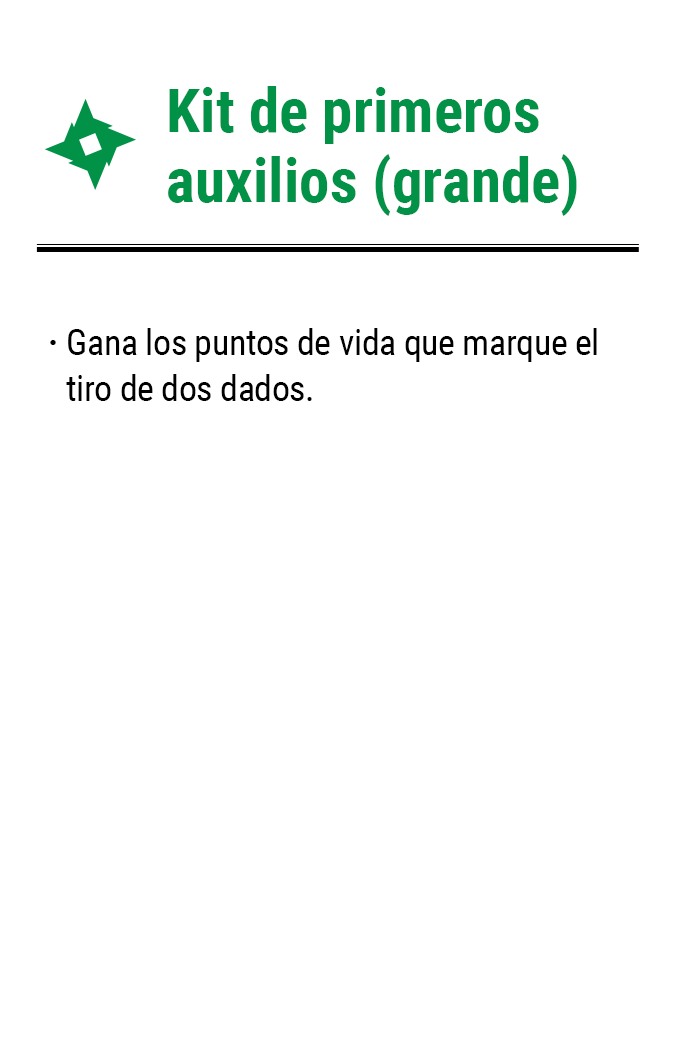
<style>
.page{position:relative;width:675px;height:1050px;background:#ffffff}
.page>*{position:absolute;margin:0}
.t1{font:61.2px/62.9px "RobotoCondensed-Bold";color:#019147}
.t2{font:35.8px/45.8px "RobotoCondensed-Regular";letter-spacing:-0.01em;color:#000000}
.t3{font:35.8px "RobotoCondensed-Bold";letter-spacing:-0.01em;color:#000000}
</style>
<div class="page">
<p class="t1" style="left:168px;top:86px;width:409px;height:130px">Kit de primeros<br>auxilios (grande)</p>
<p class="t2" style="left:66px;top:328px;width:531px;height:73px">Gana los puntos de vida que marque el tiro de dos dados.</p>
<p class="t3" style="left:50px;top:340px;width:6px;height:5px">·</p>
</div>
